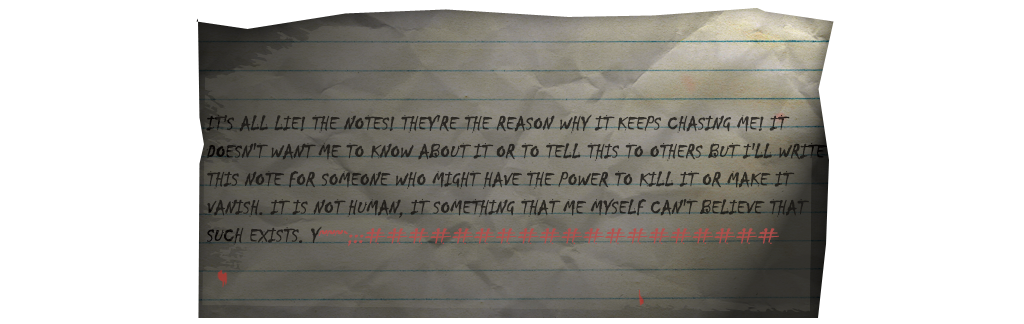
<style>
.page{position:relative;width:1024px;height:324px;background:#ffffff}
.page>*{position:absolute;margin:0}
.t1{font:20px/28px "Chiller-Regular";color:#282622;text-transform:uppercase;font-weight:bold;font-style:italic}
</style>
<div class="page">
<p class="t1" style="left:206px;top:114px;width:621px;height:132px">It's all lie! The notes! They're the reason why it keeps chasing me! It <br>doesn't want me to know about it or to tell this to others but I'll write <br>this note for someone who might have the power to kill it or make it <br>vanish. It is not human, it something that me myself can't believe that <br>such exists. Y~~~`;::###################</p>
</div>
